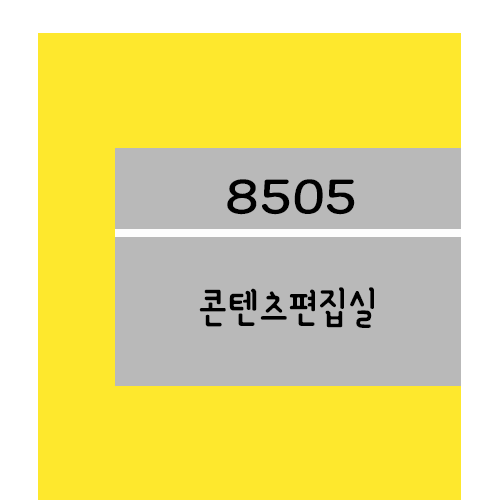
<style>
.page{position:relative;width:500px;height:500px;background:#fee82d}
.page>*{position:absolute;margin:0}
.t1{font:61.2px "YanoljaYacheR";color:#000000;scale:1.18 1}
.t2{font:48px "YanoljaYacheR";color:#000000}
</style>
<div class="page">
<p class="t1" style="left:227px;top:179px;width:128px;height:36px">8505</p>
<p class="t2" style="left:199px;top:287px;width:175px;height:41px">콘텐츠편집실</p>
</div>
